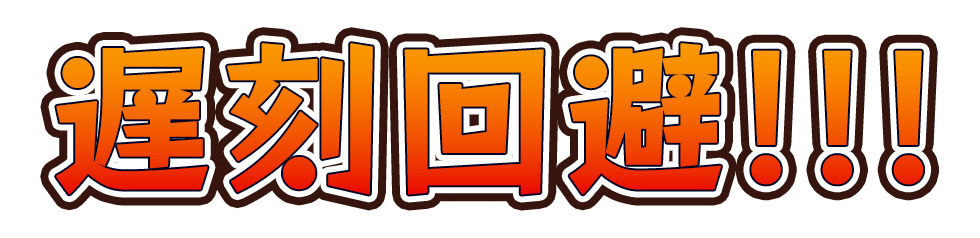
<style>
.page{position:relative;width:980px;height:238px;background:#ffffff}
.page>*{position:absolute;margin:0}
.t1{font:166.7px "RocknRollOne-Regular";font-weight:bold}
</style>
<div class="page">
<p class="t1" style="left:56px;top:43px;width:868px;height:152px">遅刻回避!!!</p>
</div>
